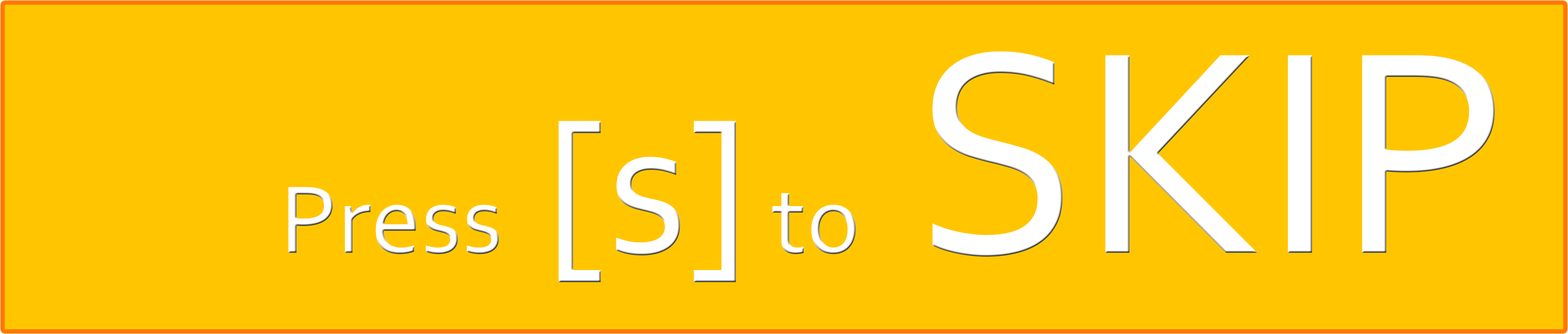
<style>
.page{position:relative;width:1568px;height:334px;background:#ffc600}
.page>*{position:absolute;margin:0}
.t1{font:100.7px "Corbel";color:#ffffff}
.t2{font:201.4px "Corbel";color:#ffffff}
.t3{font:302.1px "Corbel";color:#ffffff}
</style>
<div class="page">
<p class="t1" style="left:288px;top:51px;width:1207px;height:231px">Press<span class="t2"> [s]</span> to<span class="t3"> SKIP</span></p>
</div>
